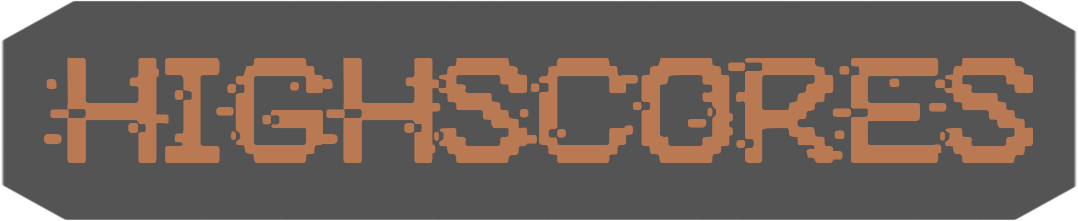
<style>
.page{position:relative;width:1078px;height:221px;background:#545454}
.page>*{position:absolute;margin:0}
.t1{font:150px "PositiveSystem";color:#b97a53}
</style>
<div class="page">
<p class="t1" style="left:44px;top:57px;width:989px;height:106px">HighScores</p>
</div>
